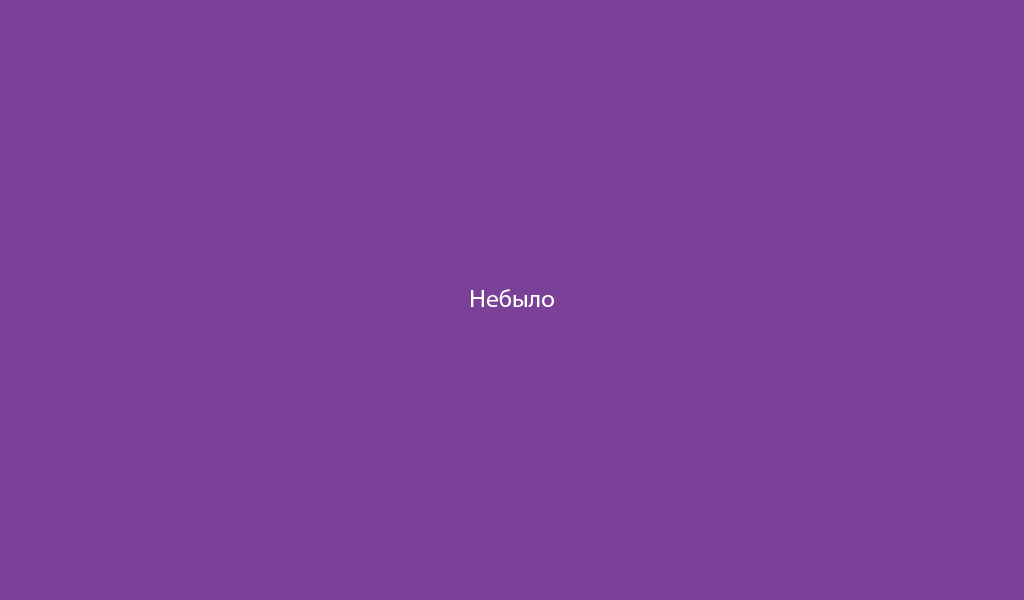
<style>
.page{position:relative;width:1024px;height:600px;background:#7b4199}
.page>*{position:absolute;margin:0}
.t1{font:25px "MyriadPro-Regular";color:#ffffff}
</style>
<div class="page">
<p class="t1" style="left:471px;top:289px;width:83px;height:18px">Небыло</p>
</div>
